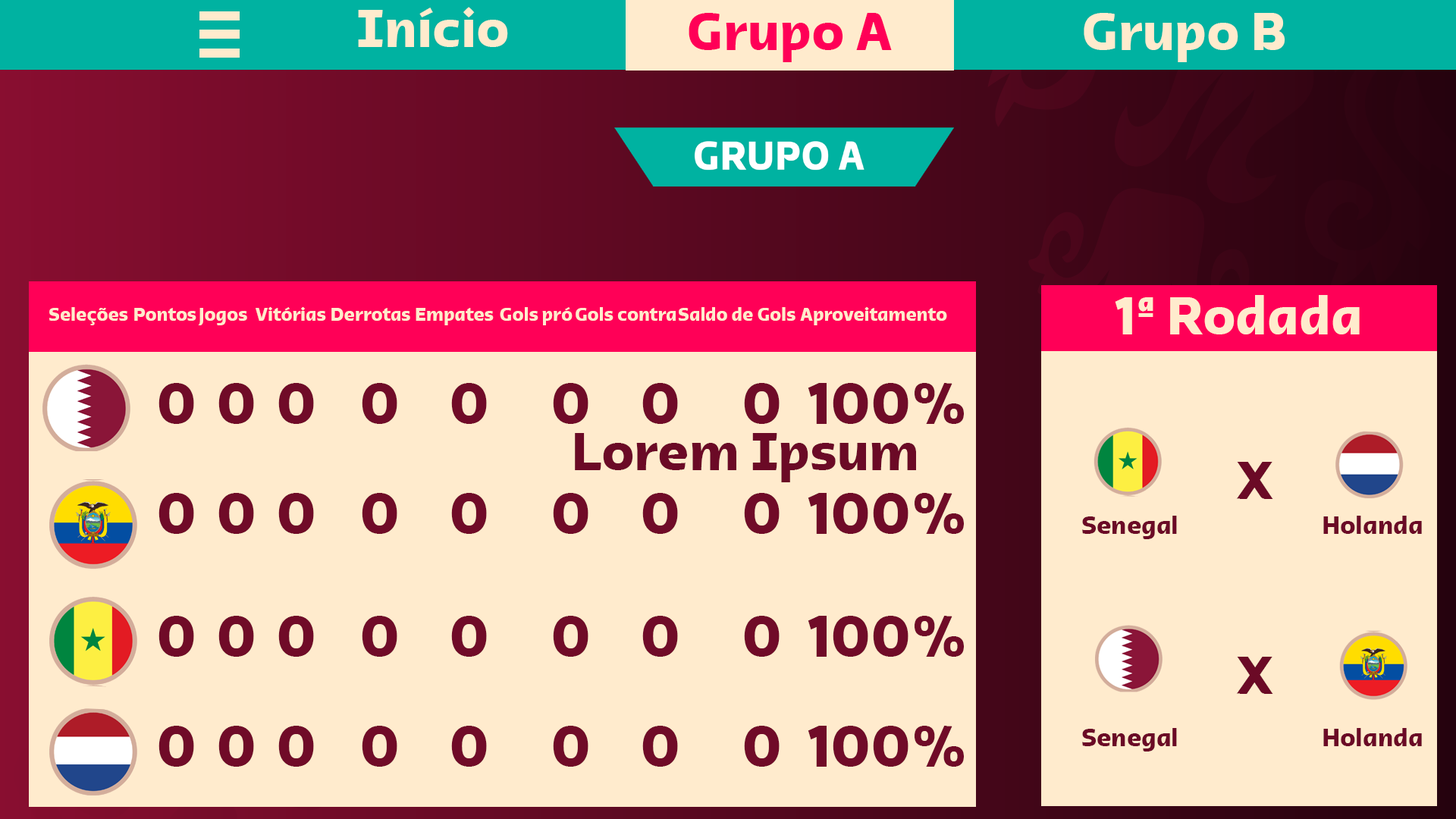
<style>
.page{position:relative;width:1456px;height:819px;background:#ffebcd}
.page>*{position:absolute;margin:0}
.t1{font:54.6px "Qatar2022Arabic-Bold";color:#ffebcd}
.t2{font:54.6px "Qatar2022Arabic-Bold";color:#ff0057}
.t3{font:18.8px "Qatar2022Arabic-Bold";color:#ffebcd}
.t4{font:59.8px "Qatar2022Arabic-Bold";color:#700b28}
.t5{font:54.6px "Qatar2022Arabic-Bold";color:#6b0a26}
.t6{font:25.6px "Qatar2022Arabic-Bold";color:#6b0a26}
</style>
<div class="page">
<p class="t1" style="left:358px;top:7px;width:150px;height:40px">Início</p>
<p class="t2" style="left:689px;top:13px;width:203px;height:49px">Grupo A</p>
<p class="t1" style="left:1084px;top:13px;width:201px;height:49px">Grupo B</p>
<p class="t1" style="left:1115px;top:295px;width:245px;height:39px">1ª Rodada</p>
<p class="t3" style="left:49px;top:306px;width:898px;height:19px">Seleções Pontos Jogos Vitórias Derrotas Empates Gols pró Gols contra Saldo de Gols Aproveitamento</p>
<p class="t4" style="left:158px;top:383px;width:806px;height:41px">0 0 0   0   0    0    0     0   100%</p>
<p class="t5" style="left:575px;top:433px;width:341px;height:49px">Lorem Ipsum</p>
<p class="t5" style="left:1236px;top:462px;width:37px;height:37px">X</p>
<p class="t4" style="left:158px;top:493px;width:806px;height:41px">0 0 0   0   0    0    0     0   100%</p>
<p class="t6" style="left:1082px;top:516px;width:340px;height:23px">Senegal                            Holanda</p>
<p class="t4" style="left:158px;top:616px;width:806px;height:41px">0 0 0   0   0    0    0     0   100%</p>
<p class="t5" style="left:1236px;top:657px;width:37px;height:37px">X</p>
<p class="t4" style="left:158px;top:726px;width:806px;height:41px">0 0 0   0   0    0    0     0   100%</p>
<p class="t6" style="left:1082px;top:728px;width:340px;height:23px">Senegal                            Holanda</p>
</div>
